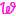
<style>
.page{position:relative;width:16px;height:16px;background:#ffffff}
.page>*{position:absolute;margin:0}
.t1{font:16px "Vibur";color:#ff1adc}
</style>
<div class="page">
<p class="t1" style="left:0px;top:2px;width:18px;height:12px">W</p>
<p class="t1" style="left:0px;top:2px;width:18px;height:12px">W</p>
</div>
